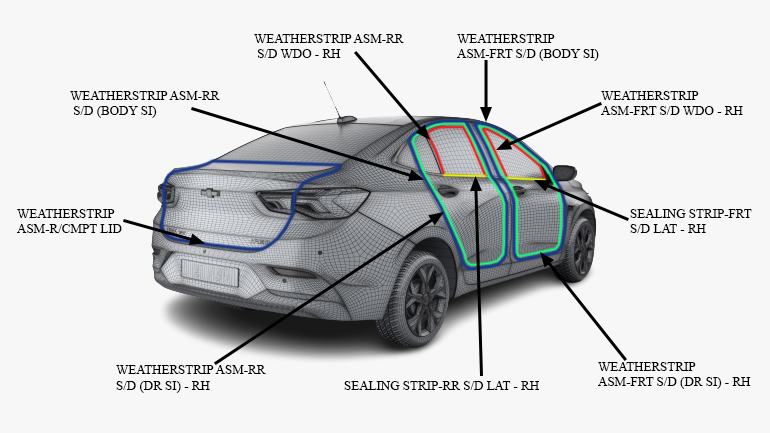
<style>
.page{position:relative;width:770px;height:433px;background:#f7f7f7}
.page>*{position:absolute;margin:0}
.t1{font:13px "TimesNewRomanPSMT";color:#000000}
</style>
<div class="page">
<p class="t1" style="left:254px;top:34px;width:150px;height:24px;text-align:right">WEATHERSTRIP ASM-RR<br> S/D WDO - RH</p>
<p class="t1" style="left:457px;top:34px;width:142px;height:27px;text-align:right">WEATHERSTRIP <br>ASM-FRT S/D (BODY SI)</p>
<p class="t1" style="left:70px;top:91px;width:150px;height:27px;text-align:right">WEATHERSTRIP ASM-RR<br> S/D (BODY SI)</p>
<p class="t1" style="left:601px;top:91px;width:142px;height:24px;text-align:right">WEATHERSTRIP <br>ASM-FRT S/D WDO - RH</p>
<p class="t1" style="left:17px;top:209px;width:105px;height:24px;text-align:right">WEATHERSTRIP <br>ASM-R/CMPT LID</p>
<p class="t1" style="left:630px;top:209px;width:122px;height:24px;text-align:right">SEALING STRIP-FRT <br>S/D LAT - RH</p>
<p class="t1" style="left:116px;top:365px;width:150px;height:28px;text-align:right">WEATHERSTRIP ASM-RR <br>S/D (DR SI) - RH</p>
<p class="t1" style="left:598px;top:362px;width:153px;height:27px;text-align:right">WEATHERSTRIP <br>ASM-FRT S/D (DR SI) - RH</p>
<p class="t1" style="left:344px;top:381px;width:195px;height:9px">SEALING STRIP-RR S/D LAT - RH</p>
</div>
